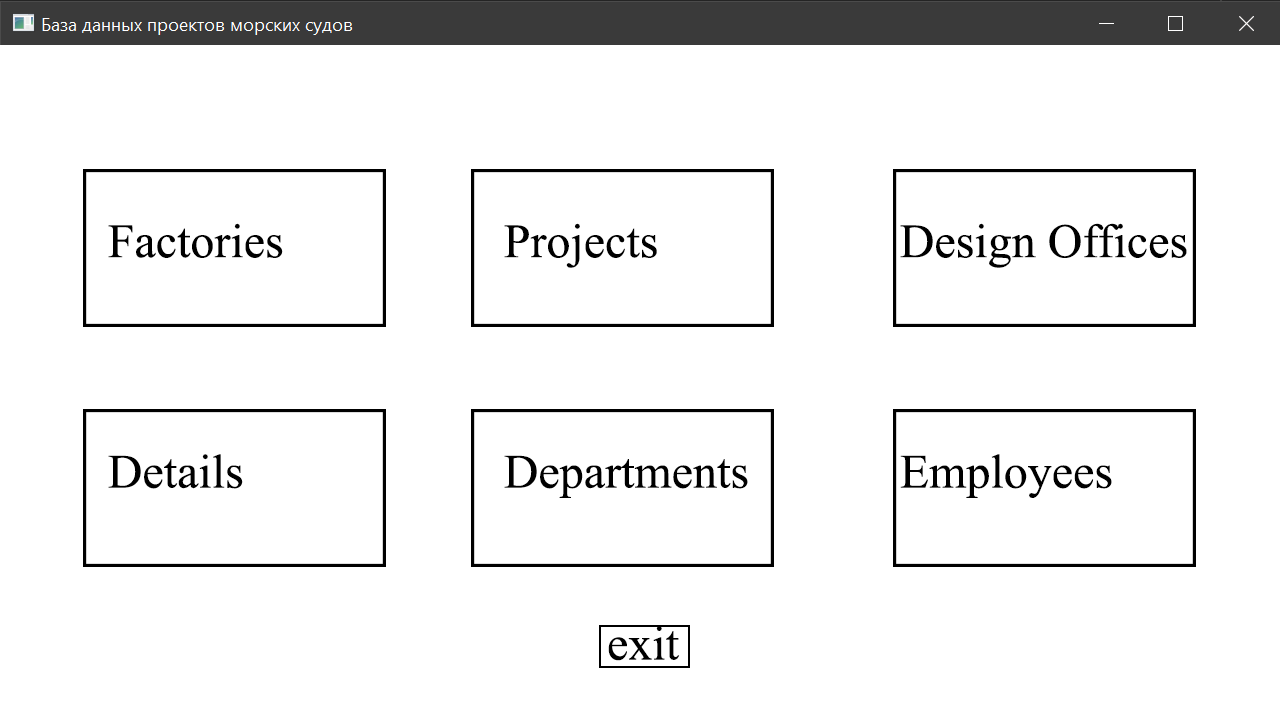
<style>
.page{position:relative;width:1280px;height:720px;background:#ffffff}
.page>*{position:absolute;margin:0}
.t1{font:48px "TimesNewRomanPSMT";color:#000000}
</style>
<div class="page">
<p class="t1" style="left:108px;top:223px;width:1079px;height:275px">Factories       Projects       Design Offices<br><br><br><br>Details        Departments     Employees</p>
<p class="t1" style="left:608px;top:626px;width:72px;height:35px">exit</p>
</div>
